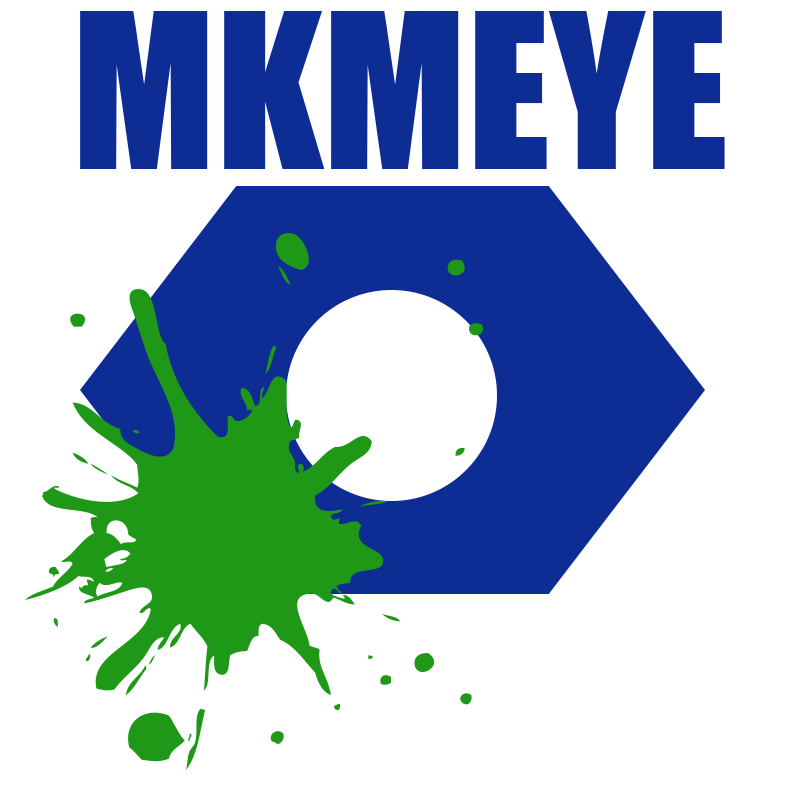
<style>
.page{position:relative;width:800px;height:800px;background:#ffffff}
.page>*{position:absolute;margin:0}
.t1{font:200.2px "Impact";color:#0d2d94}
</style>
<div class="page">
<p class="t1" style="left:80px;top:11px;width:645px;height:158px">MKMEYE</p>
</div>
